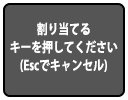
<style>
.page{position:relative;width:128px;height:100px;background:#555555}
.page>*{position:absolute;margin:0}
.t1{font:13.4px "KozGoPr6N-Bold";color:#ffffff;scale:0.81 1}
</style>
<div class="page">
<p class="t1" style="left:10px;top:22px;width:108px;height:50px;text-align:center">割り当てる<br>キーを押してください<br>(Escでキャンセル)</p>
</div>
